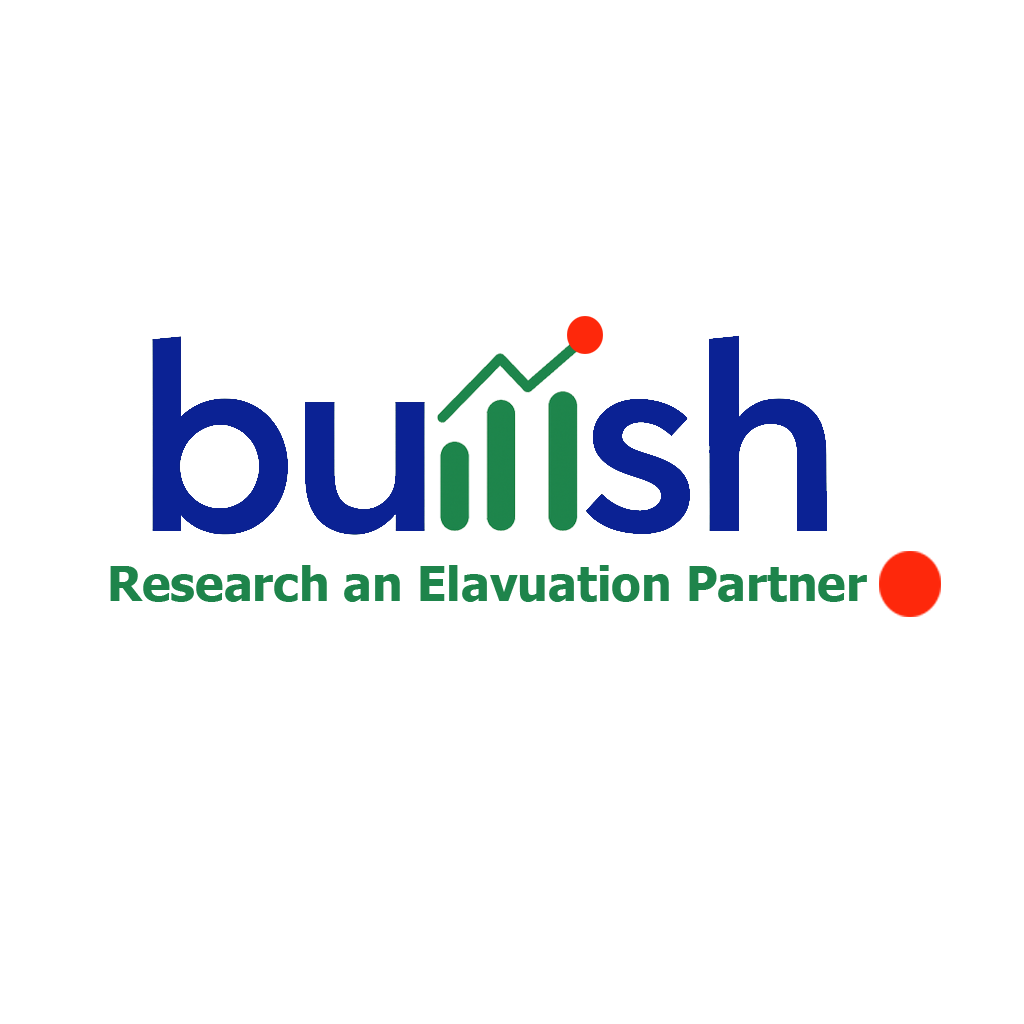
<style>
.page{position:relative;width:1024px;height:1024px;background:#ffffff}
.page>*{position:absolute;margin:0}
.t1{font:48px "Tahoma-Bold";color:#1e844b}
</style>
<div class="page">
<p class="t1" style="left:110px;top:565px;width:757px;height:37px">Research an Elavuation Partner</p>
</div>
